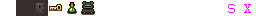
<style>
.page{position:relative;width:256px;height:16px;background:#ffffff}
.page>*{position:absolute;margin:0}
.t1{font:12px "Courier";color:#ff00ff;text-transform:uppercase}
</style>
<div class="page">
<p class="t1" style="left:228px;top:4px;width:7px;height:9px">S</p>
<p class="t1" style="left:244px;top:4px;width:7px;height:9px">X</p>
</div>
